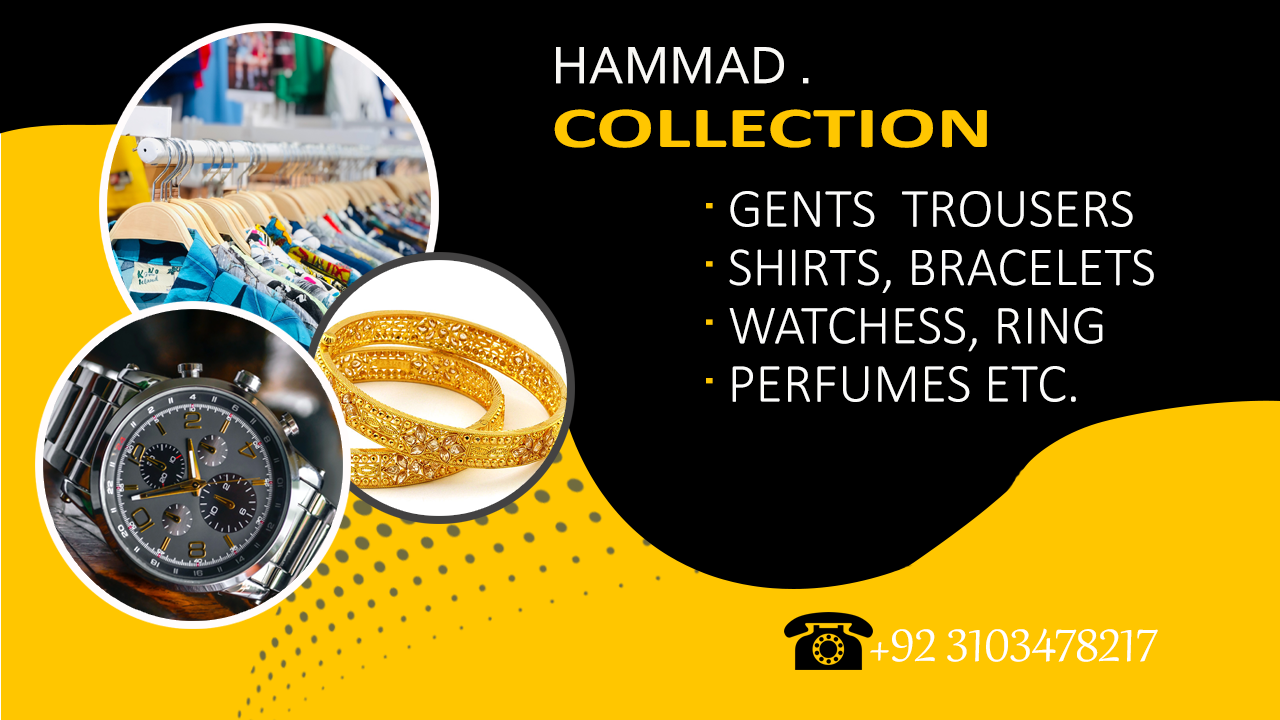
<style>
.page{position:relative;width:1280px;height:720px;background:#000000}
.page>*{position:absolute;margin:0}
.t1{font:55.4px "Corbel";color:#f9f8f5;text-transform:uppercase}
.t2{font:58.3px "Calibri-Bold";color:#ffc600;text-transform:uppercase;scale:1.47 1}
.t3{font:55.4px/58.3px "Calibri-Light";color:#fcfcfb;text-transform:uppercase}
.t4{font:55.4px/33.2px "Calibri-Bold";color:#fcfcfb;text-transform:uppercase}
.t5{font:55.4px/58.3px "Corbel";color:#ffc600;text-transform:uppercase;scale:1.26 1}
.t6{font:55.4px/33.2px "Corbel";color:#ffc600;text-transform:uppercase;scale:1.26 1}
.t7{font:55.4px "Gabriola";color:#ffffff;text-transform:uppercase}
</style>
<div class="page">
<p class="t1" style="left:556px;top:47px;width:253px;height:37px">hammad .</p>
<p class="t2" style="left:554px;top:109px;width:433px;height:39px">collection</p>
<p class="t3" style="left:729px;top:191px;width:425px;height:211px"><span class="t4"> </span>gents  trousers<br> shirts, bracelets<br> watchess, ring <br> perfumes etc.</p>
<p class="t5" style="left:706px;top:203px;width:7px;height:181px"><span class="t6">. <br></span>.<br>.<br>.</p>
<p class="t7" style="left:870px;top:628px;width:288px;height:34px">+92 3103478217</p>
</div>
